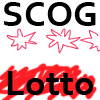
<style>
.page{position:relative;width:100px;height:100px;background:#ffffff}
.page>*{position:absolute;margin:0}
.t1{font:37.3px "Corbel-Bold";color:#000000}
</style>
<div class="page">
<p class="t1" style="left:4px;top:2px;width:92px;height:24px">SCOG</p>
<p class="t1" style="left:7px;top:71px;width:86px;height:24px">Lotto</p>
</div>
